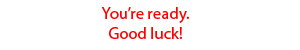
<style>
.page{position:relative;width:300px;height:50px;background:#ffffff}
.page>*{position:absolute;margin:0}
.t1{font:16.7px "MyriadPro-Regular";color:#ff0000}
</style>
<div class="page">
<p class="t1" style="left:101px;top:7px;width:88px;height:32px;text-align:center">You’re ready.<br>Good luck!</p>
</div>
